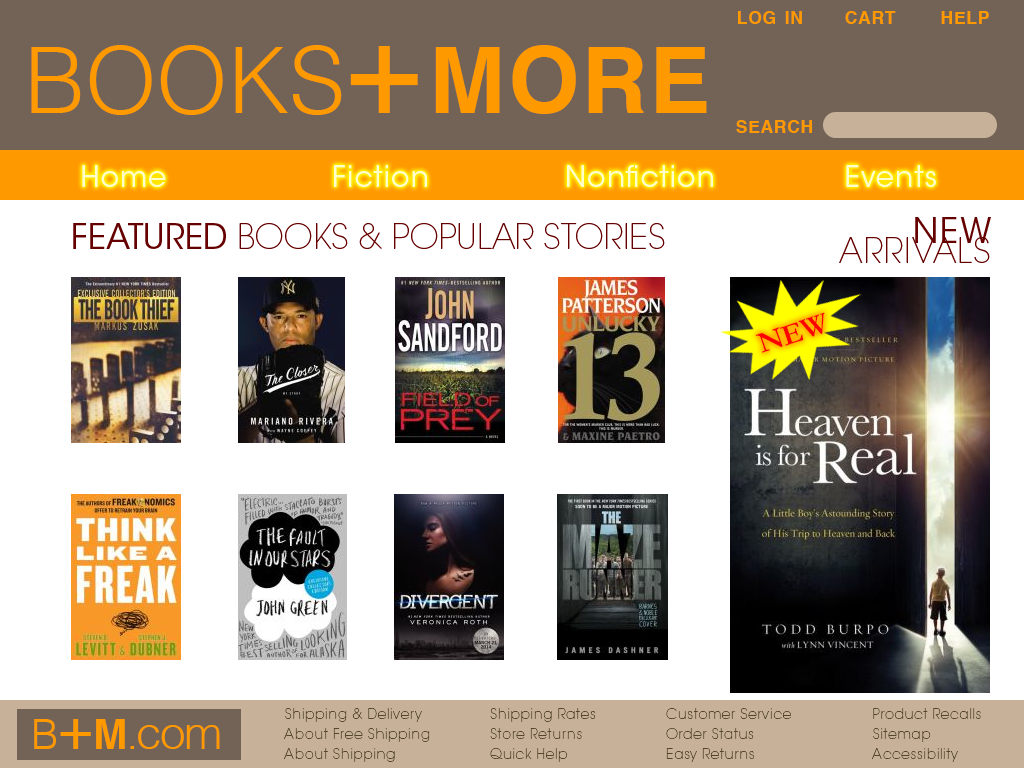
<style>
.page{position:relative;width:1024px;height:768px;background:#ffffff}
.page>*{position:absolute;margin:0}
.t1{font:25px "Helvetica-Bold";letter-spacing:0.04em;color:#ff9900;font-variant:small-caps}
.t2{font:131px "Helvetica-Light";color:#ff9900;font-variant:small-caps}
.t3{font:131px "Helvetica";letter-spacing:0.02em;color:#ff9900;font-variant:small-caps}
.t4{font:131px "Helvetica-Bold";letter-spacing:0.02em;color:#ff9900;font-variant:small-caps}
.t5{font:28.8px "ITCAvantGardeStd-Bk";letter-spacing:0.04em;color:#ffffcc}
.t6{font:34px/20px "ITCAvantGardeStd-XLt";letter-spacing:0.04em;color:#660000}
.t7{font:34px/20px "ITCAvantGardeStd-Bk";letter-spacing:0.04em;color:#660000}
.t8{font:34px "ITCAvantGardeStd-XLt";color:#660000}
.t9{font:34px "ITCAvantGardeStd-Bk";color:#660000}
.t10{font:30px "Garamond-Bold";letter-spacing:-0.02em;color:#ff0000}
.t11{font:14px/20px "ITCAvantGardeStd-XLt";letter-spacing:0.04em;color:#544627}
.t12{font:46.1px "Helvetica-Light";letter-spacing:-0.025em;color:#ff9900}
.t13{font:59.1px "Helvetica-Light";letter-spacing:-0.025em;color:#ff9900;font-variant:small-caps}
.t14{font:59.1px "Helvetica";letter-spacing:-0.025em;color:#ff9900;font-variant:small-caps}
.t15{font:59.1px "Helvetica-Bold";letter-spacing:-0.025em;color:#ff9900;font-variant:small-caps}
</style>
<div class="page">
<p class="t1" style="left:738px;top:11px;width:251px;height:13px">log in  cart    help</p>
<p class="t2" style="left:31px;top:45px;width:676px;height:70px">books<span class="t3">+</span><span class="t4">more</span></p>
<p class="t1" style="left:736px;top:120px;width:76px;height:13px">search</p>
<p class="t5" style="left:82px;top:165px;width:854px;height:22px">Home           Fiction          Nonfiction          Events</p>
<p class="t6" style="left:839px;top:217px;width:152px;height:46px;text-align:right"><span class="t7">NEW </span><br>ARRIVALS</p>
<p class="t8" style="left:73px;top:223px;width:592px;height:26px"><span class="t9">FEATURED</span> BOOKS &amp; POPULAR STORIES</p>
<p class="t10" style="left:755px;top:312px;width:70px;height:41px;rotate:-18deg">NEW</p>
<p class="t11" style="left:284px;top:708px;width:146px;height:54px">Shipping &amp; Delivery<br>About Free Shipping<br>About Shipping</p>
<p class="t11" style="left:490px;top:708px;width:106px;height:54px">Shipping Rates<br>Store Returns     <br>Quick Help</p>
<p class="t11" style="left:666px;top:708px;width:126px;height:54px">Customer Service<br>Order Status<br>Easy Returns</p>
<p class="t11" style="left:872px;top:708px;width:109px;height:54px">Product Recalls<br>Sitemap<br>Accessibility</p>
<p class="t12" style="left:34px;top:719px;width:186px;height:30px"><span class="t13">b</span><span class="t14">+</span><span class="t15">m</span>.com</p>
</div>
